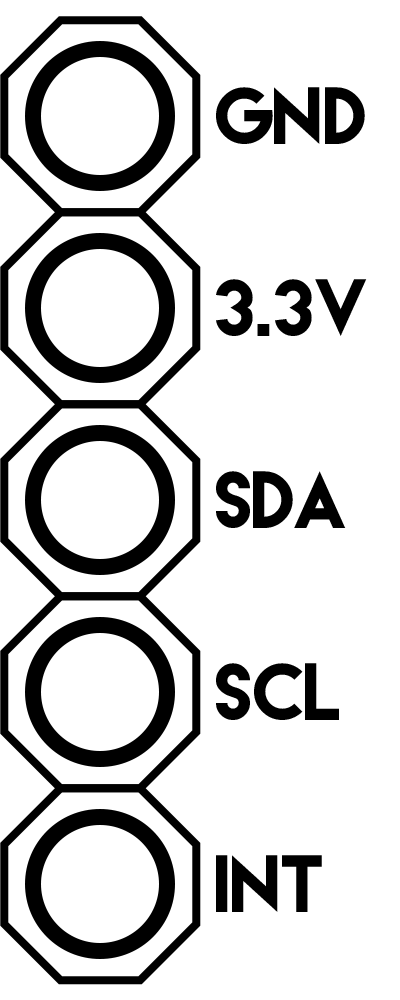
<style>
.page{position:relative;width:400px;height:1000px;background:#ffffff}
.page>*{position:absolute;margin:0}
.t1{font:72px "LemonMilk";letter-spacing:-0.02em;color:#000000}
</style>
<div class="page">
<p class="t1" style="left:216px;top:87px;width:149px;height:57px">gnd</p>
<p class="t1" style="left:216px;top:279px;width:151px;height:57px">3.3v</p>
<p class="t1" style="left:216px;top:471px;width:130px;height:57px">sda</p>
<p class="t1" style="left:216px;top:663px;width:123px;height:57px">scl</p>
<p class="t1" style="left:216px;top:855px;width:106px;height:57px">int</p>
</div>
